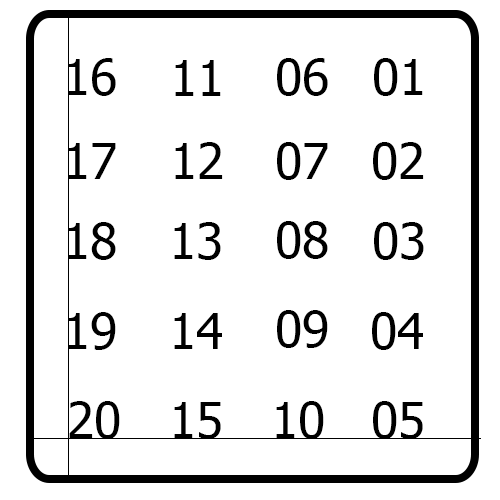
<style>
.page{position:relative;width:500px;height:500px;background:#ffffff}
.page>*{position:absolute;margin:0}
.t1{font:50px "Tahoma";color:#000000}
</style>
<div class="page">
<p class="t1" style="left:68px;top:58px;width:48px;height:38px">16</p>
<p class="t1" style="left:175px;top:60px;width:46px;height:36px">11</p>
<p class="t1" style="left:277px;top:58px;width:51px;height:38px">06</p>
<p class="t1" style="left:374px;top:58px;width:49px;height:38px">01</p>
<p class="t1" style="left:68px;top:143px;width:48px;height:36px">17</p>
<p class="t1" style="left:175px;top:142px;width:48px;height:37px">12</p>
<p class="t1" style="left:277px;top:142px;width:51px;height:38px">07</p>
<p class="t1" style="left:373px;top:142px;width:51px;height:38px">02</p>
<p class="t1" style="left:68px;top:222px;width:48px;height:38px">18</p>
<p class="t1" style="left:174px;top:222px;width:47px;height:38px">13</p>
<p class="t1" style="left:277px;top:221px;width:51px;height:38px">08</p>
<p class="t1" style="left:374px;top:222px;width:50px;height:38px">03</p>
<p class="t1" style="left:68px;top:312px;width:48px;height:38px">19</p>
<p class="t1" style="left:174px;top:313px;width:48px;height:36px">14</p>
<p class="t1" style="left:277px;top:310px;width:51px;height:38px">09</p>
<p class="t1" style="left:372px;top:312px;width:51px;height:38px">04</p>
<p class="t1" style="left:69px;top:401px;width:51px;height:38px">20</p>
<p class="t1" style="left:276px;top:401px;width:48px;height:38px">10</p>
<p class="t1" style="left:373px;top:401px;width:50px;height:38px">05</p>
<p class="t1" style="left:174px;top:402px;width:47px;height:37px">15</p>
</div>
